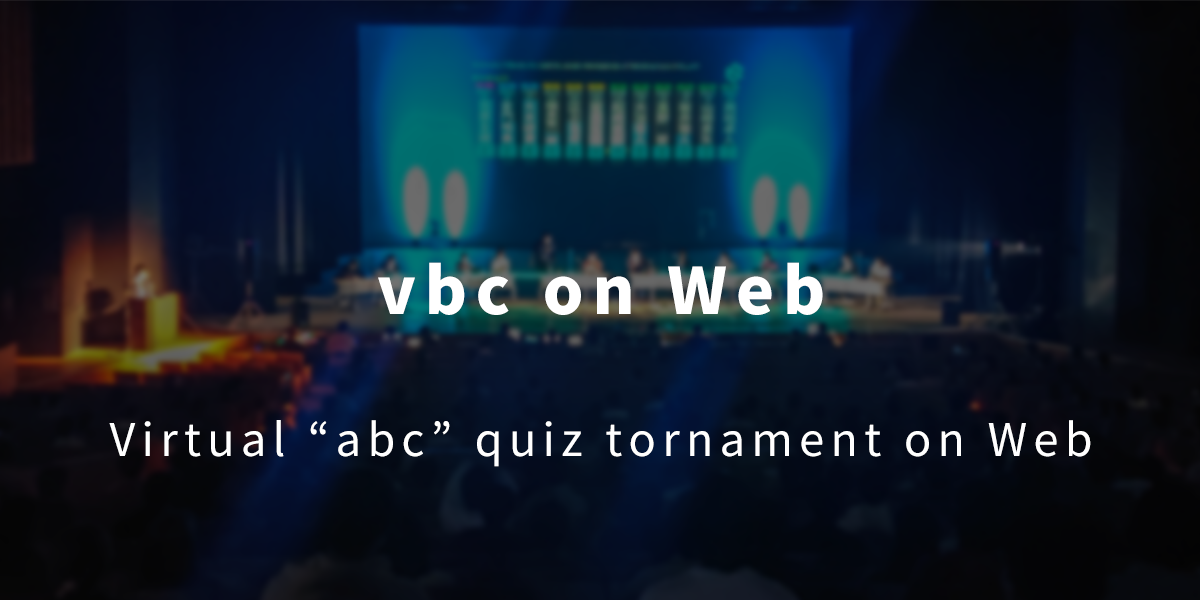
<style>
.page{position:relative;width:1200px;height:600px}
.page>*{position:absolute;margin:0}
.t1{font:45px/142px "SourceHanSansJP-Regular";letter-spacing:0.14em;color:#ffffff}
.t2{font:64px/142px "SourceHanSansJP-Heavy";letter-spacing:0.14em;color:#ffffff}
</style>
<div class="page">
<p class="t1" style="left:109px;top:262px;width:982px;height:205px;text-align:center"><span class="t2">vbc on Web<br></span>Virtual “abc” quiz tornament on Web</p>
</div>
